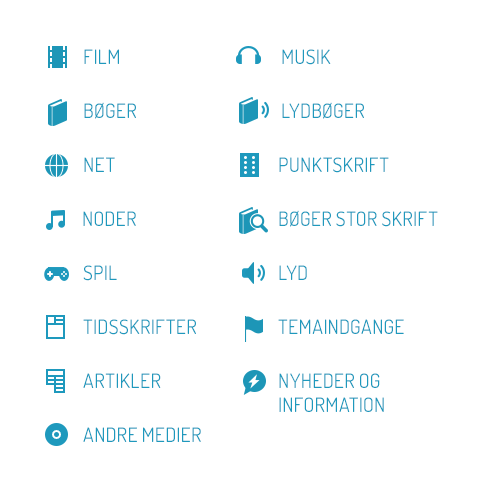
<style>
.page{position:relative;width:500px;height:500px;background:#ffffff}
.page>*{position:absolute;margin:0}
.t1{font:20px "Dosis-Regular";color:#1e99bd;text-transform:uppercase}
</style>
<div class="page">
<p class="t1" style="left:84px;top:49px;width:35px;height:15px">FILM</p>
<p class="t1" style="left:282px;top:49px;width:49px;height:16px">MUSIK</p>
<p class="t1" style="left:84px;top:102px;width:52px;height:17px">BØGER</p>
<p class="t1" style="left:282px;top:102px;width:82px;height:17px">LYDBØGER</p>
<p class="t1" style="left:84px;top:157px;width:31px;height:15px">NET</p>
<p class="t1" style="left:279px;top:157px;width:110px;height:16px">PUNKTSKRIFT</p>
<p class="t1" style="left:83px;top:211px;width:53px;height:15px">NODER</p>
<p class="t1" style="left:279px;top:210px;width:159px;height:17px">BØGER STOR SKRIFT</p>
<p class="t1" style="left:83px;top:265px;width:34px;height:16px">SPIL</p>
<p class="t1" style="left:279px;top:265px;width:28px;height:15px">LYD</p>
<p class="t1" style="left:83px;top:319px;width:113px;height:16px">TIDSSKRIFTER</p>
<p class="t1" style="left:278px;top:319px;width:126px;height:15px">TEMAINDGANGE</p>
<p class="t1" style="left:83px;top:373px;width:78px;height:15px">ARTIKLER</p>
<p class="t1" style="left:279px;top:373px;width:105px;height:39px">Nyheder og  <br>information</p>
<p class="t1" style="left:83px;top:427px;width:118px;height:15px">ANDRE MEDIER</p>
</div>
